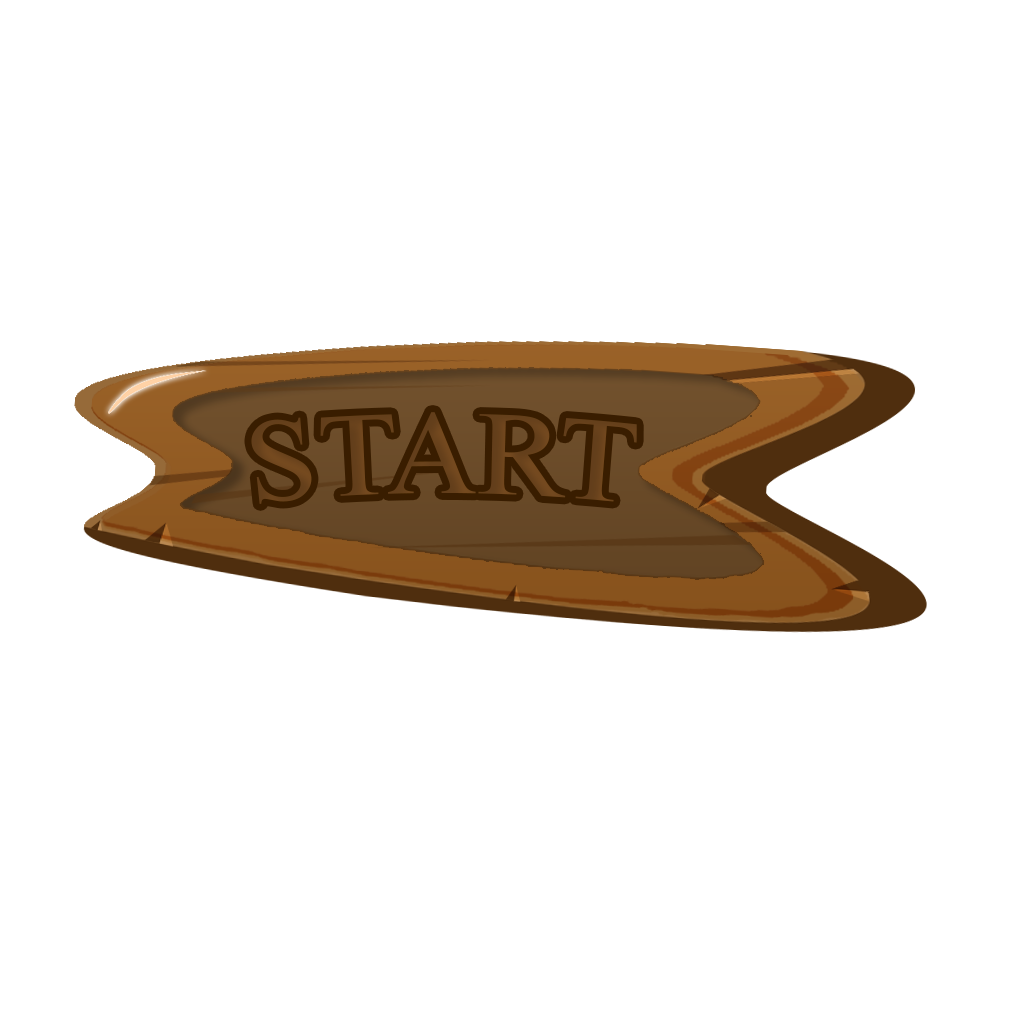
<style>
.page{position:relative;width:1024px;height:1024px;background:#ffffff}
.page>*{position:absolute;margin:0}
.t1{font:120px "TimesNewRomanPSMT";color:#774b20}
</style>
<div class="page">
<p class="t1" style="left:251px;top:412px;width:386px;height:92px">START</p>
</div>
